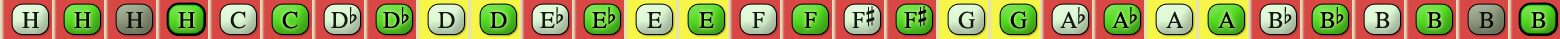
<style>
.page{position:relative;width:1560px;height:39px}
.page>*{position:absolute;margin:0}
.t1{font:24px "OpusChords";color:#000000}
.t2{font:24px "OpusChords";letter-spacing:-0.05em;color:#000000}
</style>
<div class="page">
<p class="t1" style="left:852px;top:6px;width:23px;height:22px;opacity:0.9">F#</p>
<p class="t1" style="left:904px;top:6px;width:23px;height:22px">F#</p>
<p class="t1" style="left:22px;top:12px;width:17px;height:16px;opacity:0.9">H</p>
<p class="t1" style="left:74px;top:12px;width:17px;height:16px">H</p>
<p class="t1" style="left:126px;top:12px;width:17px;height:16px;opacity:0.9">H</p>
<p class="t1" style="left:178px;top:12px;width:17px;height:16px">H</p>
<p class="t1" style="left:230px;top:11px;width:16px;height:18px;opacity:0.9">C</p>
<p class="t1" style="left:282px;top:11px;width:16px;height:18px">C</p>
<p class="t1" style="left:331px;top:7px;width:26px;height:21px;opacity:0.9">Db</p>
<p class="t1" style="left:383px;top:7px;width:26px;height:21px">Db</p>
<p class="t1" style="left:438px;top:12px;width:17px;height:16px;opacity:0.9">D</p>
<p class="t1" style="left:490px;top:12px;width:17px;height:16px">D</p>
<p class="t1" style="left:540px;top:7px;width:24px;height:21px;opacity:0.9">Eb</p>
<p class="t1" style="left:592px;top:7px;width:24px;height:21px">Eb</p>
<p class="t1" style="left:647px;top:12px;width:15px;height:16px;opacity:0.9">E</p>
<p class="t1" style="left:699px;top:12px;width:15px;height:16px">E</p>
<p class="t1" style="left:752px;top:12px;width:13px;height:16px;opacity:0.9">F</p>
<p class="t1" style="left:804px;top:12px;width:13px;height:16px">F</p>
<p class="t1" style="left:958px;top:11px;width:17px;height:18px;opacity:0.9">G</p>
<p class="t1" style="left:1010px;top:11px;width:17px;height:18px">G</p>
<p class="t2" style="left:1060px;top:7px;width:25px;height:21px;opacity:0.9">Ab</p>
<p class="t2" style="left:1112px;top:7px;width:25px;height:21px">Ab</p>
<p class="t1" style="left:1166px;top:11px;width:17px;height:17px;opacity:0.9">A</p>
<p class="t1" style="left:1218px;top:11px;width:17px;height:17px">A</p>
<p class="t1" style="left:1268px;top:7px;width:24px;height:21px;opacity:0.9">Bb</p>
<p class="t1" style="left:1320px;top:7px;width:24px;height:21px">Bb</p>
<p class="t1" style="left:1375px;top:12px;width:15px;height:16px;opacity:0.9">B</p>
<p class="t1" style="left:1427px;top:12px;width:15px;height:16px">B</p>
<p class="t1" style="left:1479px;top:12px;width:15px;height:16px;opacity:0.9">B</p>
<p class="t1" style="left:1531px;top:12px;width:15px;height:16px">B</p>
</div>
